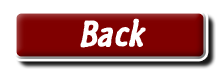
<style>
.page{position:relative;width:220px;height:70px;background:#ffffff}
.page>*{position:absolute;margin:0}
.t1{font:36.8px "SegoeMarker";color:#ffffff;font-weight:bold;font-style:italic}
</style>
<div class="page">
<p class="t1" style="left:80px;top:18px;width:66px;height:30px">Back</p>
</div>
